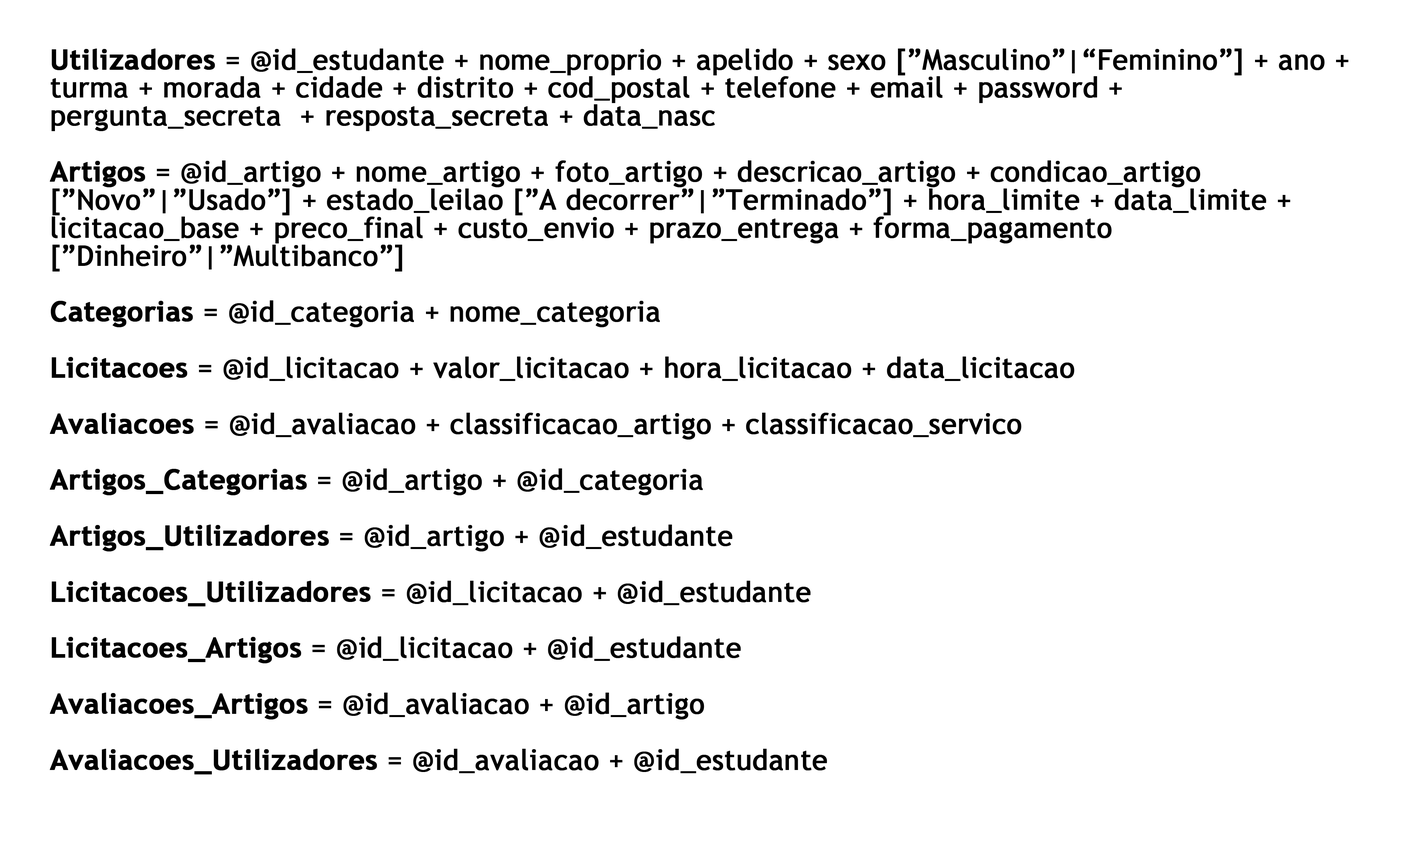
<style>
.page{position:relative;width:1407px;height:847px;background:#ffffff}
.page>*{position:absolute;margin:0}
.t1{font:28px/28px "TrebuchetMS";color:#000000;font-weight:bold}
.t2{font:28px/28px "TrebuchetMS-Bold";color:#000000;font-weight:bold}
</style>
<div class="page">
<p class="t1" style="left:50px;top:49px;width:1299px;height:726px"><span class="t2">Utilizadores</span> = @id_estudante + nome_proprio + apelido + sexo [”Masculino”|“Feminino”] + ano + turma + morada + cidade + distrito + cod_postal + telefone + email + password + pergunta_secreta  + resposta_secreta + data_nasc<br><br><span class="t2">Artigos</span> = @id_artigo + nome_artigo + foto_artigo + descricao_artigo + condicao_artigo [”Novo”|”Usado”] + estado_leilao [”A decorrer”|”Terminado”] + hora_limite + data_limite + licitacao_base + preco_final + custo_envio + prazo_entrega + forma_pagamento [”Dinheiro”|”Multibanco”]<br><br><span class="t2">Categorias</span> = @id_categoria + nome_categoria<br><br><span class="t2">Licitacoes</span> = @id_licitacao + valor_licitacao + hora_licitacao + data_licitacao<br><br><span class="t2">Avaliacoes</span> = @id_avaliacao + classificacao_artigo + classificacao_servico<br><br><span class="t2">Artigos_Categorias</span> = @id_artigo + @id_categoria<br><br><span class="t2">Artigos_Utilizadores</span> = @id_artigo + @id_estudante<br><br><span class="t2">Licitacoes_Utilizadores</span> = @id_licitacao + @id_estudante<br><br><span class="t2">Licitacoes_Artigos</span> = @id_licitacao + @id_estudante<br><br><span class="t2">Avaliacoes_Artigos</span> = @id_avaliacao + @id_artigo<br><br><span class="t2">Avaliacoes_Utilizadores</span> = @id_avaliacao + @id_estudante</p>
</div>
